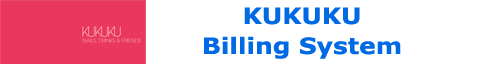
<style>
.page{position:relative;width:504px;height:64px;background:#ffffff}
.page>*{position:absolute;margin:0}
.t1{font:22.5px "Verdana-Bold";color:#0069e4;scale:1.11 1}
</style>
<div class="page">
<p class="t1" style="left:204px;top:7px;width:197px;height:52px;text-align:center">KUKUKU<br>Billing System</p>
</div>
